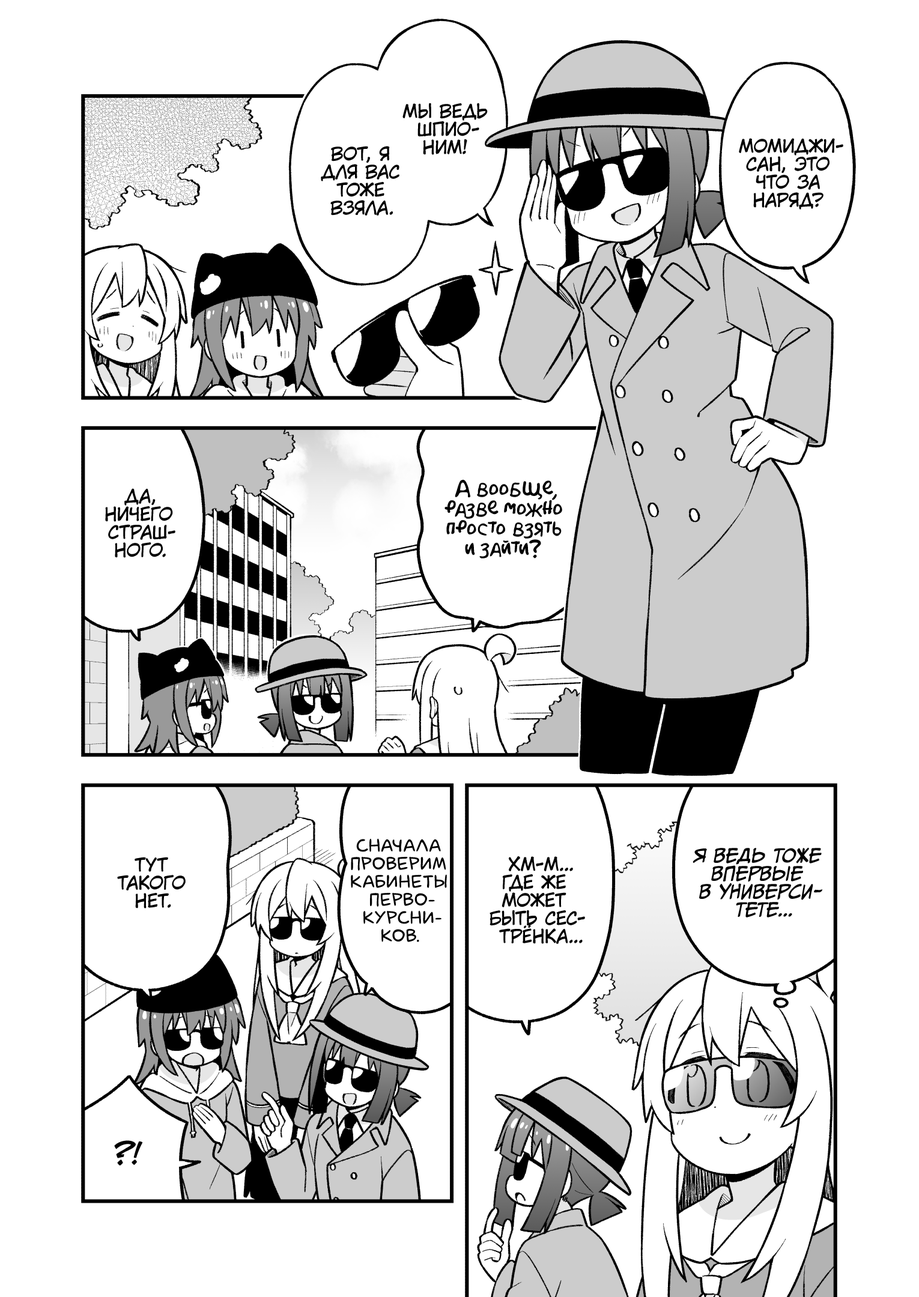
<style>
.page{position:relative;width:919px;height:1297px;background:#ffffff}
.page>*{position:absolute;margin:0}
.t1{font:18px "KuraiVoice2";color:#000000;text-transform:uppercase}
.t2{font:19.8px "AkbarPlain";color:#000000}
.t3{font:18px "laCartoonerie";color:#000000;text-transform:uppercase}
.t4{font:18px "CCMeanwhile";color:#000000;text-transform:uppercase;font-style:italic}
.t5{font:28.8px "v_CCJeffCampbell";color:#000000;text-transform:uppercase}
</style>
<div class="page">
<p class="t1" style="left:402px;top:103px;width:86px;height:52px;text-align:center">Мы ведь<br>шпио-<br>ним!</p>
<p class="t1" style="left:321px;top:146px;width:78px;height:70px;text-align:center">Вот, я<br>для вас<br>тоже<br>взяла.</p>
<p class="t1" style="left:739px;top:138px;width:104px;height:72px;text-align:center">Момиджи-<br>сан, это<br>что за<br>наряд?</p>
<p class="t2" style="left:445px;top:480px;width:117px;height:79px;text-align:center">А вообще,<br>разве можно<br>просто взять<br>и зайти?</p>
<p class="t1" style="left:105px;top:488px;width:70px;height:70px;text-align:center">Да,<br>ничего<br>страш-<br>ного.</p>
<p class="t3" style="left:351px;top:839px;width:96px;height:103px;text-align:center">Сначала<br>проверим<br>кабинеты<br>перво-<br>курсни-<br>ков.</p>
<p class="t1" style="left:117px;top:857px;width:69px;height:52px;text-align:center">тут<br>такого<br>нет.</p>
<p class="t1" style="left:490px;top:857px;width:95px;height:87px;text-align:center">Хм-м...<br>Где же<br>может<br>быть сес-<br>трёнка...</p>
<p class="t4" style="left:693px;top:848px;width:130px;height:70px;text-align:center">Я ведь тоже<br>впервые<br>в универси-<br>тете...</p>
<p class="t5" style="left:114px;top:1141px;width:29px;height:25px">?!</p>
</div>
